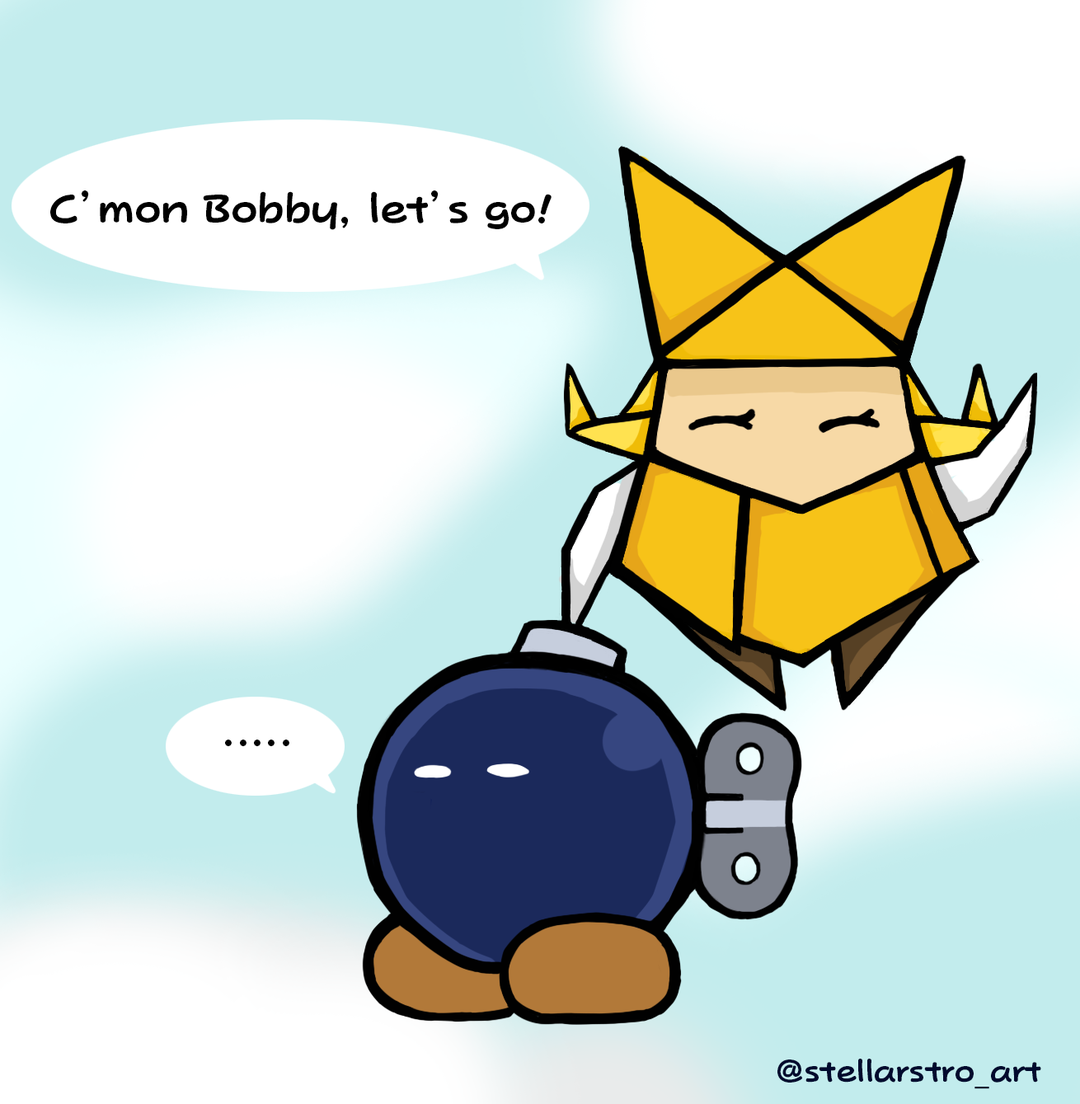
<style>
.page{position:relative;width:1080px;height:1104px;background:#ffffff}
.page>*{position:absolute;margin:0}
.t1{font:39.6px "PopJoyStd-B";color:#000000}
.t2{font:29.7px "PopJoyStd-B";color:#000a2e}
</style>
<div class="page">
<p class="t1" style="left:50px;top:190px;width:502px;height:40px">C’mon Bobby, let’s go!</p>
<p class="t1" style="left:225px;top:740px;width:64px;height:6px">.....</p>
<p class="t2" style="left:778px;top:1059px;width:263px;height:30px">@stellarstro_art</p>
</div>
